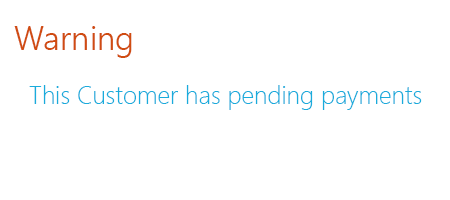
<style>
.page{position:relative;width:450px;height:200px;background:#ffffff}
.page>*{position:absolute;margin:0}
.t1{font:33.3px "SegoeUI-Semilight";color:#d04c11}
.t2{font:25px "SegoeUI-Light";color:#19acdc}
</style>
<div class="page">
<p class="t1" style="left:14px;top:26px;width:118px;height:32px">Warning</p>
<p class="t2" style="left:29px;top:85px;width:393px;height:25px">This Customer has pending payments</p>
</div>
